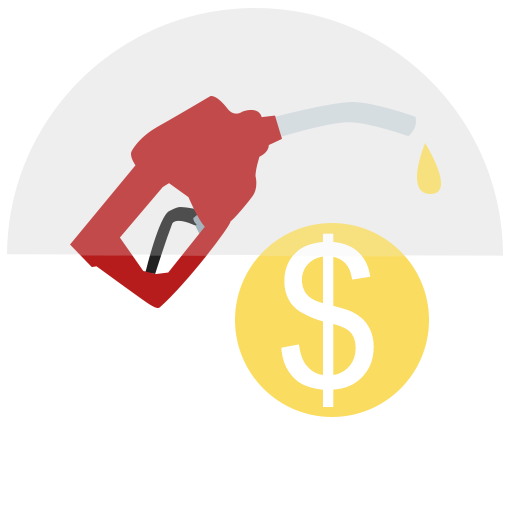
<style>
.page{position:relative;width:512px;height:512px;background:#ffffff}
.page>*{position:absolute;margin:0}
.t1{font:195.2px "ArialMT";letter-spacing:-0.04em;color:#ffffff}
</style>
<div class="page">
<p class="t1" style="left:281px;top:233px;width:93px;height:174px">$</p>
</div>
